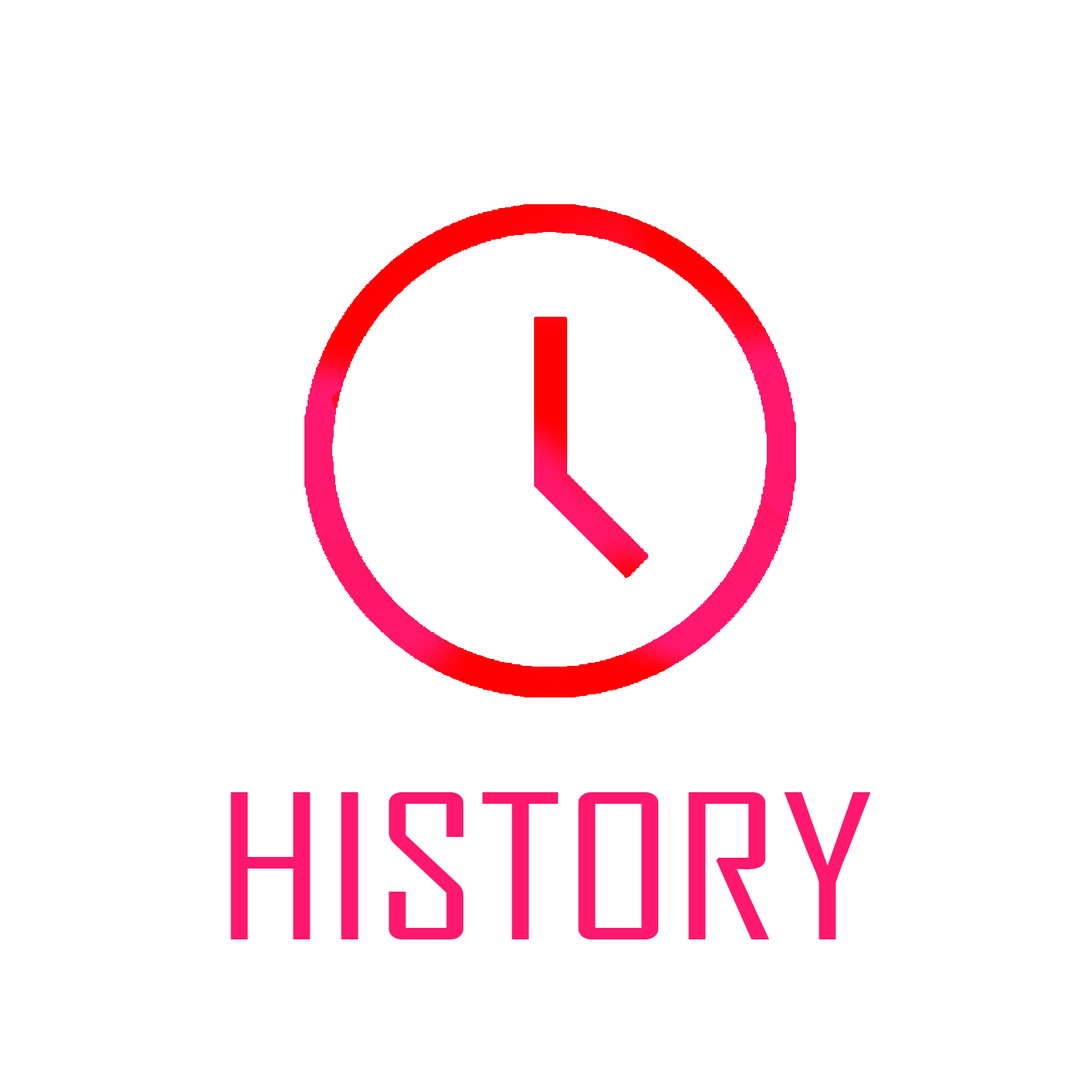
<style>
.page{position:relative;width:1092px;height:1092px;background:#ffffff}
.page>*{position:absolute;margin:0}
.t1{font:192.6px "AgencyFB-Reg";color:#ff186e;scale:1.29 1}
</style>
<div class="page">
<p class="t1" style="left:230px;top:792px;width:641px;height:147px">HISTORY</p>
</div>
